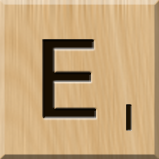
<style>
.page{position:relative;width:159px;height:159px}
.page>*{position:absolute;margin:0}
.t1{font:116px "MS-UIGothic";color:#180e01}
.t2{font:36px "GillSansMT";color:#1c1101;font-weight:bold;scale:1.1 1}
</style>
<div class="page">
<p class="t1" style="left:43px;top:40px;width:53px;height:79px">E</p>
<p class="t2" style="left:126px;top:104px;width:6px;height:27px">1</p>
</div>
